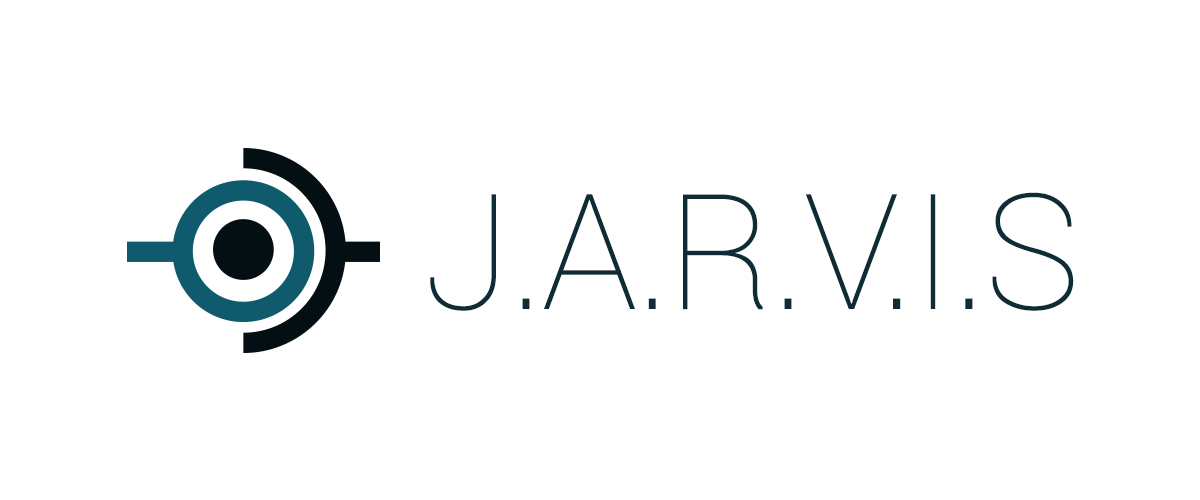
<style>
.page{position:relative;width:1200px;height:500px;background:#ffffff}
.page>*{position:absolute;margin:0}
.t1{font:161px "Roboto-Thin";letter-spacing:-0.013em;color:#0d2c35}
</style>
<div class="page">
<p class="t1" style="left:430px;top:192px;width:644px;height:119px">J.A.R.V.I.S</p>
</div>
